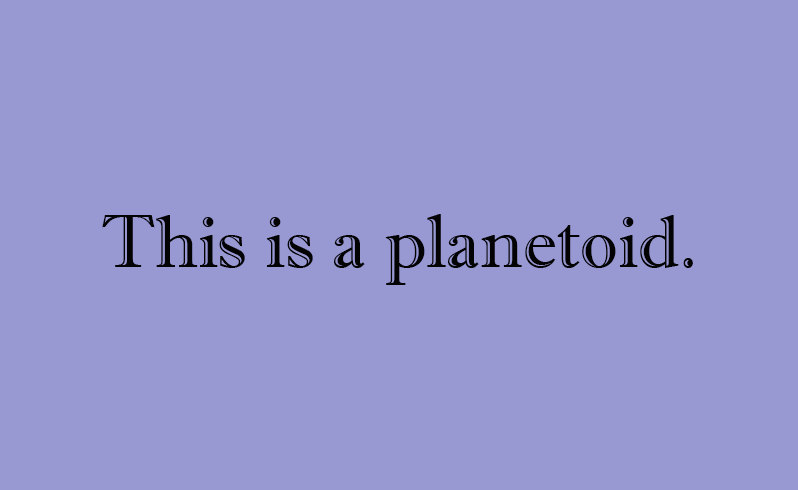
<style>
.page{position:relative;width:798px;height:490px;background:#9898d3}
.page>*{position:absolute;margin:0}
.t1{font:74.8px "ImprintMT-Shadow";color:#030303}
</style>
<div class="page">
<p class="t1" style="left:102px;top:214px;width:591px;height:71px">This is a planetoid.</p>
</div>
